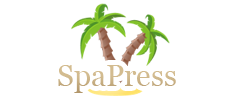
<style>
.page{position:relative;width:236px;height:97px;background:#ffffff}
.page>*{position:absolute;margin:0}
.t1{font:30px "Georgia";color:#d0b98d}
</style>
<div class="page">
<p class="t1" style="left:58px;top:65px;width:118px;height:28px">SpaPress</p>
</div>
